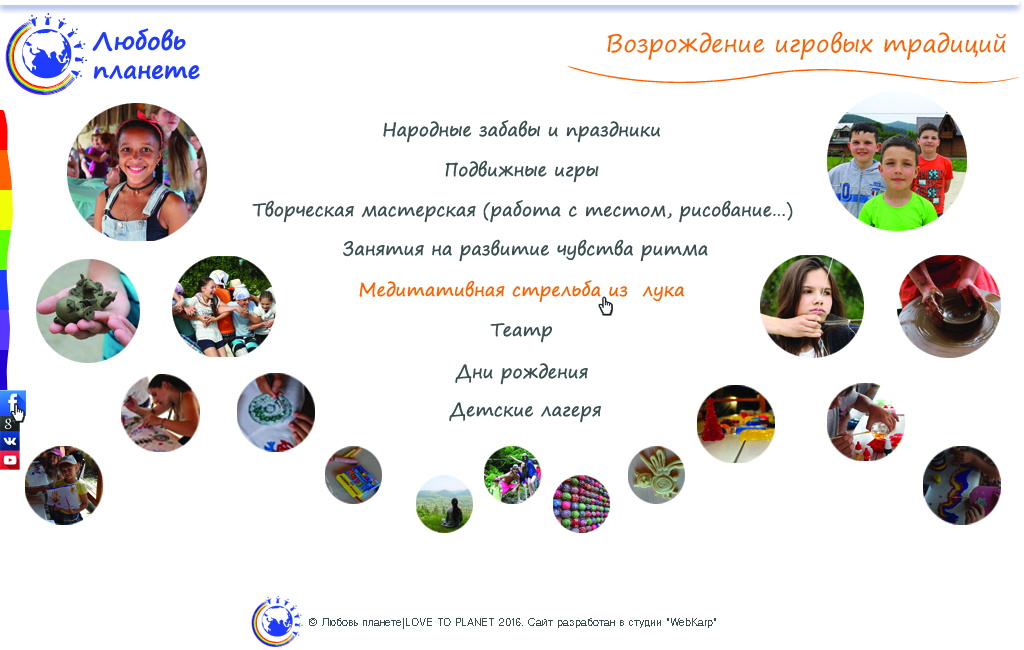
<style>
.page{position:relative;width:1024px;height:650px;background:#ffffff}
.page>*{position:absolute;margin:0}
.t1{font:24px "SegoePrint-Bold";color:#1e3bff}
.t2{font:24px "SegoePrint";color:#ff6100}
.t3{font:18px "SegoePrint";color:#3a504f}
.t4{font:18px "SegoePrint";color:#ff6100}
.t5{font:12px "Helvetica_Light-Normal";color:#3a504f}
</style>
<div class="page">
<p class="t1" style="left:92px;top:28px;width:108px;height:52px">Любовь планете</p>
<p class="t2" style="left:607px;top:31px;width:399px;height:29px">Возрождение игровых традиций</p>
<p class="t3" style="left:383px;top:120px;width:277px;height:23px">Народные забавы и праздники</p>
<p class="t3" style="left:445px;top:160px;width:154px;height:23px">Подвижные игры</p>
<p class="t3" style="left:252px;top:200px;width:541px;height:23px">Творческая мастерская (работа с тестом, рисование…)</p>
<p class="t3" style="left:343px;top:239px;width:365px;height:23px">Занятия на развитие чувства ритма</p>
<p class="t4" style="left:359px;top:280px;width:325px;height:23px">Медитативная стрельба из  лука</p>
<p class="t3" style="left:490px;top:323px;width:62px;height:20px">Театр</p>
<p class="t3" style="left:455px;top:363px;width:133px;height:22px">Дни рождения</p>
<p class="t3" style="left:449px;top:402px;width:152px;height:21px">Детские лагеря</p>
<p class="t5" style="left:309px;top:618px;width:407px;height:11px">© Любовь планете|LOVE TO PLANET 2016. Сайт разработан в студии "WebKarp"</p>
</div>
